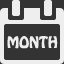
<style>
.page{position:relative;width:64px;height:64px;background:#333333}
.page>*{position:absolute;margin:0}
.t1{font:14px "HoboStd";color:#eeeeee}
</style>
<div class="page">
<p class="t1" style="left:7px;top:36px;width:51px;height:13px">MONTH</p>
</div>
